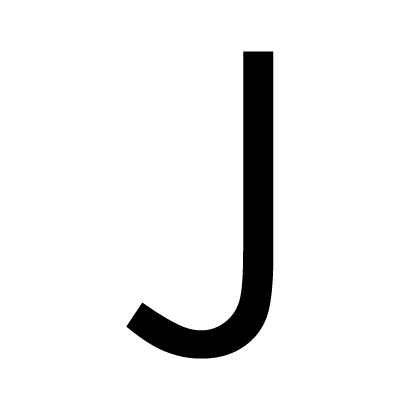
<style>
.page{position:relative;width:400px;height:400px;background:#ffffff}
.page>*{position:absolute;margin:0}
.t1{font:416.7px "CenturyGothic";color:#000000}
</style>
<div class="page">
<p class="t1" style="left:126px;top:51px;width:148px;height:308px">J</p>
</div>
